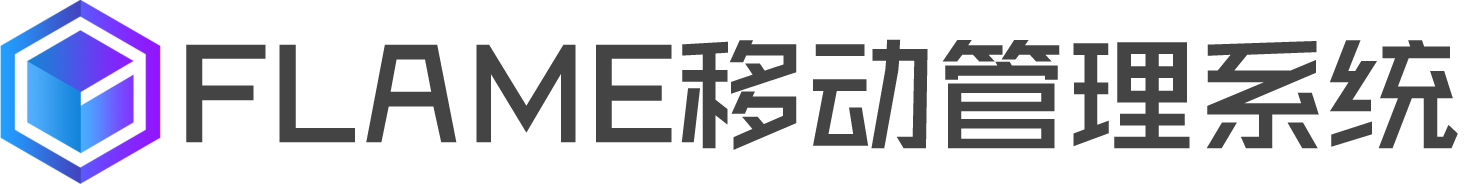
<style>
.page{position:relative;width:1471px;height:184px;background:#ffffff}
.page>*{position:absolute;margin:0}
.t1{font:133.5px "REEJI-BigYoung-BoldGB2.0";letter-spacing:-0.025em;color:#444444}
</style>
<div class="page">
<p class="t1" style="left:186px;top:39px;width:1272px;height:111px">FLAME移动管理系统</p>
</div>
